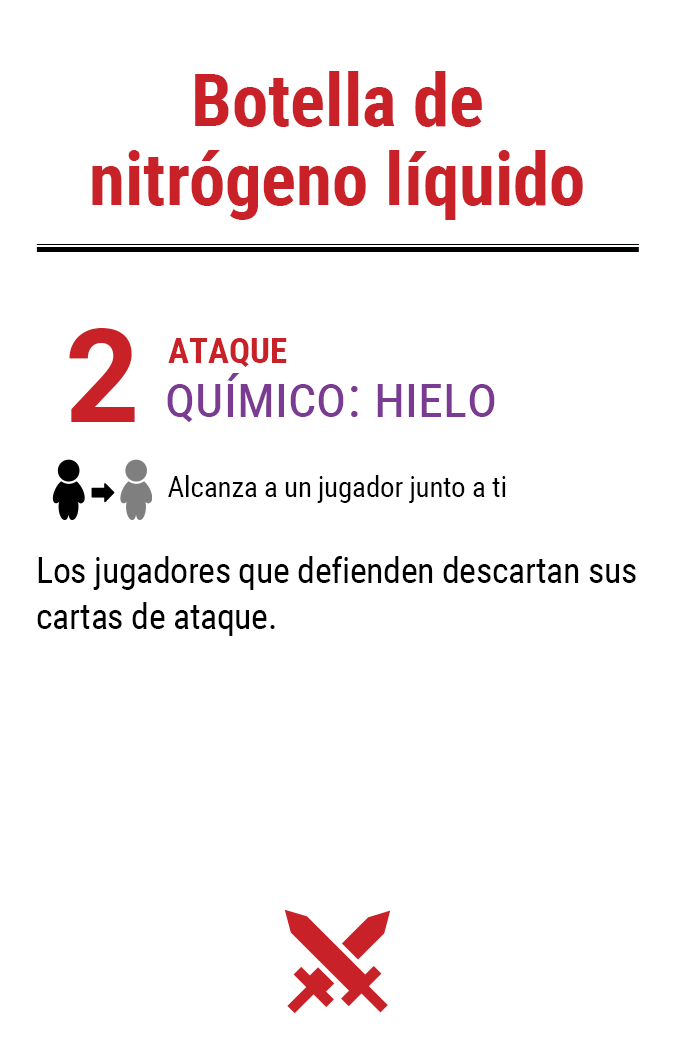
<style>
.page{position:relative;width:675px;height:1050px;background:#ffffff}
.page>*{position:absolute;margin:0}
.t1{font:72.9px/71.4px "RobotoCondensed-Bold";color:#c82127}
.t2{font:130px "Roboto-Bold";letter-spacing:-0.06em;color:#c82127}
.t3{font:35px "RobotoCondensed-Bold";color:#c82127}
.t4{font:58.3px "RobotoCondensed-Regular";color:#7c3b92;font-variant:small-caps}
.t5{font:29.2px "RobotoCondensed-Regular";letter-spacing:-0.01em;color:#000000}
.t6{font:35.8px/45.8px "RobotoCondensed-Regular";letter-spacing:-0.01em;color:#000000}
</style>
<div class="page">
<p class="t1" style="left:92px;top:71px;width:491px;height:149px;text-align:center">Botella de<br>nitrógeno líquido</p>
<p class="t2" style="left:69px;top:328px;width:66px;height:94px">2</p>
<p class="t3" style="left:168px;top:338px;width:119px;height:29px">ATAQUE</p>
<p class="t4" style="left:167px;top:373px;width:328px;height:50px">químico: hielo</p>
<p class="t5" style="left:168px;top:475px;width:338px;height:28px">Alcanza a un jugador junto a ti</p>
<p class="t6" style="left:37px;top:556px;width:599px;height:80px">Los jugadores que defienden descartan sus cartas de ataque.</p>
</div>
